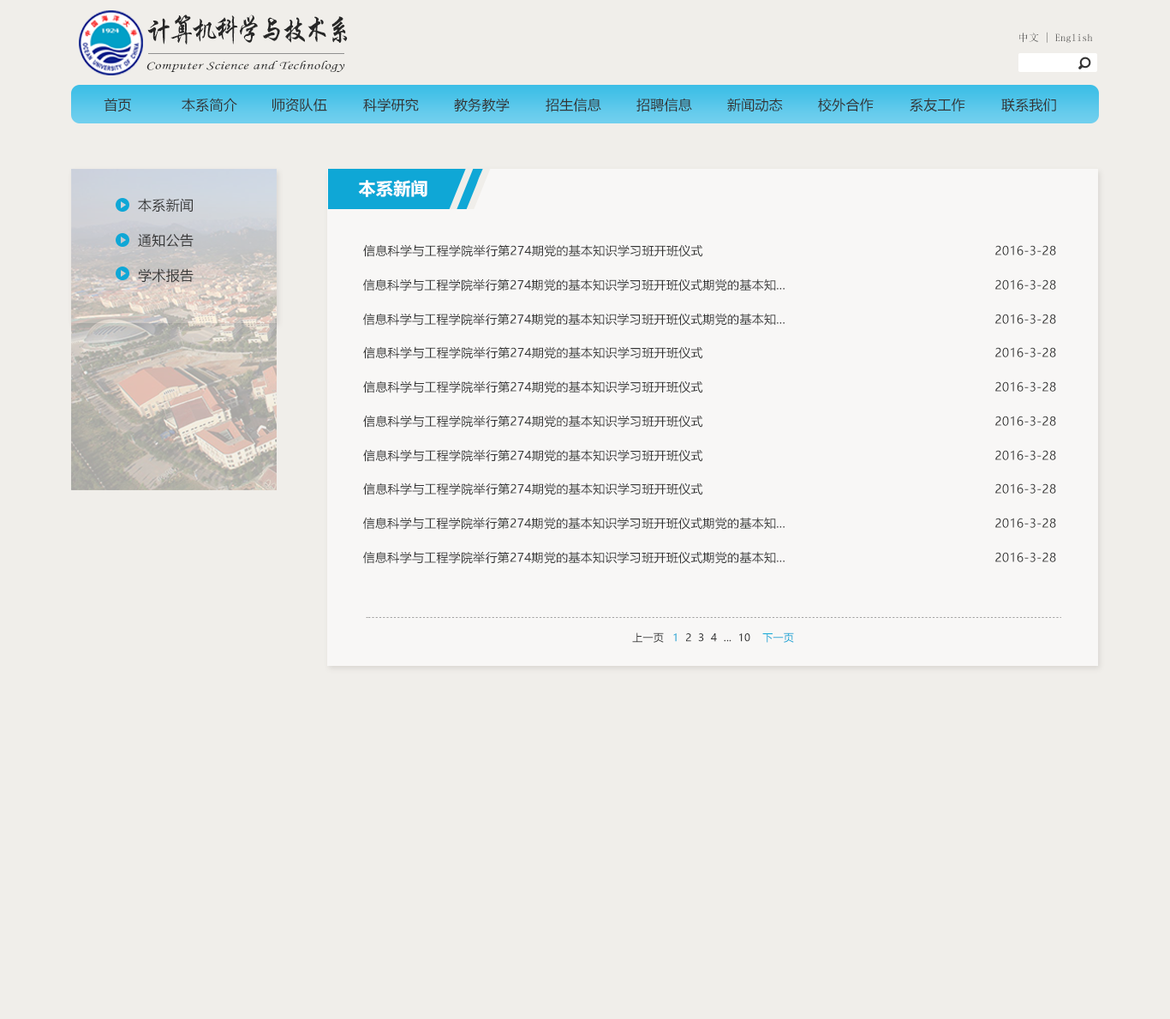
<style>
.page{position:relative;width:1170px;height:1019px;background:#f0eeea}
.page>*{position:absolute;margin:0}
.t1{font:29.8px "STXingkai";letter-spacing:-0.14em;color:#272727;scale:0.88 1}
.t2{font:10.3px "SimSun";letter-spacing:0.02em}
.t3{font:11.8px "STLiti";letter-spacing:0.02em;color:#272727;scale:1.34 1}
.t4{font:13.7px "MicrosoftYaHei";letter-spacing:0.02em;color:#333333}
.t5{font:17.1px "MicrosoftYaHei-Bold";letter-spacing:0.02em;color:#ffffff}
.t6{font:13.7px "MicrosoftYaHei";letter-spacing:0.02em;color:#383838}
.t7{font:12px "MicrosoftYaHei";letter-spacing:0.02em;color:#333333}
.t8{font:10.3px "MicrosoftYaHei";letter-spacing:0.02em;color:#383838}
.t9{font:10.3px "MicrosoftYaHei";letter-spacing:0.02em;color:#0fa7d6}
</style>
<div class="page">
<p class="t1" style="left:147px;top:15px;width:201px;height:30px">计算机科学与技术系</p>
<p class="t2" style="left:1020px;top:32px;width:73px;height:11px">中文 | English</p>
<p class="t3" style="left:147px;top:61px;width:198px;height:11px">Computer Science and Technology</p>
<p class="t4" style="left:104px;top:98px;width:27px;height:14px">首页</p>
<p class="t4" style="left:182px;top:98px;width:55px;height:14px">本系简介</p>
<p class="t4" style="left:272px;top:98px;width:55px;height:14px">师资队伍</p>
<p class="t4" style="left:363px;top:98px;width:56px;height:14px">科学研究</p>
<p class="t4" style="left:454px;top:98px;width:56px;height:14px">教务教学</p>
<p class="t4" style="left:546px;top:98px;width:56px;height:14px">招生信息</p>
<p class="t4" style="left:637px;top:98px;width:55px;height:14px">招聘信息</p>
<p class="t4" style="left:727px;top:98px;width:56px;height:14px">新闻动态</p>
<p class="t4" style="left:818px;top:98px;width:56px;height:14px">校外合作</p>
<p class="t4" style="left:910px;top:98px;width:56px;height:14px">系友工作</p>
<p class="t4" style="left:1002px;top:98px;width:54px;height:14px">联系我们</p>
<p class="t5" style="left:358px;top:180px;width:70px;height:17px">本系新闻</p>
<p class="t6" style="left:138px;top:198px;width:55px;height:14px">本系新闻</p>
<p class="t6" style="left:138px;top:233px;width:56px;height:14px">通知公告</p>
<p class="t7" style="left:363px;top:244px;width:340px;height:13px">信息科学与工程学院举行第274期党的基本知识学习班开班仪式</p>
<p class="t7" style="left:996px;top:245px;width:60px;height:10px">2016-3-28</p>
<p class="t6" style="left:138px;top:268px;width:56px;height:15px">学术报告</p>
<p class="t7" style="left:363px;top:278px;width:422px;height:13px">信息科学与工程学院举行第274期党的基本知识学习班开班仪式期党的基本知...</p>
<p class="t7" style="left:996px;top:279px;width:60px;height:11px">2016-3-28</p>
<p class="t7" style="left:363px;top:313px;width:422px;height:13px">信息科学与工程学院举行第274期党的基本知识学习班开班仪式期党的基本知...</p>
<p class="t7" style="left:996px;top:314px;width:60px;height:10px">2016-3-28</p>
<p class="t7" style="left:363px;top:346px;width:340px;height:13px">信息科学与工程学院举行第274期党的基本知识学习班开班仪式</p>
<p class="t7" style="left:996px;top:347px;width:60px;height:10px">2016-3-28</p>
<p class="t7" style="left:363px;top:380px;width:340px;height:13px">信息科学与工程学院举行第274期党的基本知识学习班开班仪式</p>
<p class="t7" style="left:996px;top:381px;width:60px;height:11px">2016-3-28</p>
<p class="t7" style="left:363px;top:415px;width:340px;height:13px">信息科学与工程学院举行第274期党的基本知识学习班开班仪式</p>
<p class="t7" style="left:996px;top:416px;width:60px;height:10px">2016-3-28</p>
<p class="t7" style="left:363px;top:449px;width:340px;height:13px">信息科学与工程学院举行第274期党的基本知识学习班开班仪式</p>
<p class="t7" style="left:996px;top:450px;width:60px;height:10px">2016-3-28</p>
<p class="t7" style="left:363px;top:482px;width:340px;height:13px">信息科学与工程学院举行第274期党的基本知识学习班开班仪式</p>
<p class="t7" style="left:996px;top:483px;width:60px;height:11px">2016-3-28</p>
<p class="t7" style="left:363px;top:517px;width:422px;height:13px">信息科学与工程学院举行第274期党的基本知识学习班开班仪式期党的基本知...</p>
<p class="t7" style="left:996px;top:518px;width:60px;height:10px">2016-3-28</p>
<p class="t7" style="left:363px;top:551px;width:422px;height:13px">信息科学与工程学院举行第274期党的基本知识学习班开班仪式期党的基本知...</p>
<p class="t7" style="left:996px;top:552px;width:60px;height:10px">2016-3-28</p>
<p class="t8" style="left:632px;top:632px;width:32px;height:11px">上一页</p>
<p class="t8" style="left:673px;top:633px;width:78px;height:9px"><span class="t9">1</span>  2  3  4  ...  10</p>
<p class="t9" style="left:763px;top:632px;width:31px;height:11px">下一页</p>
</div>
